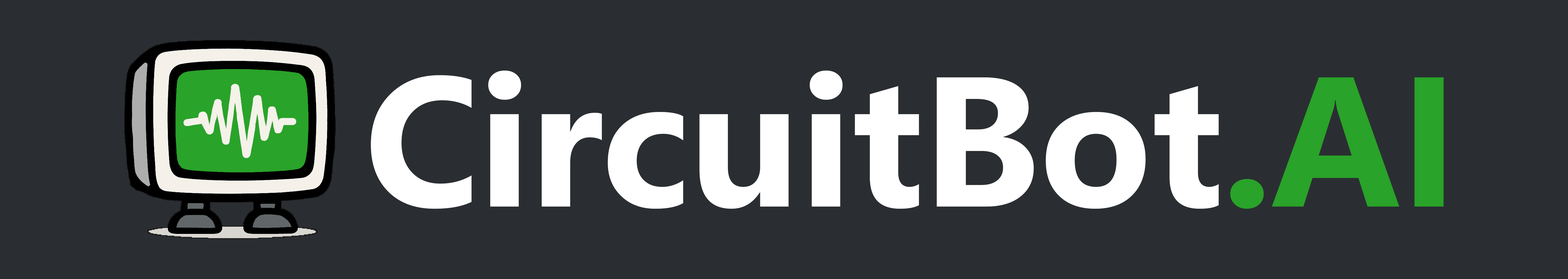
<style>
.page{position:relative;width:1568px;height:279px;background:#2a2e32}
.page>*{position:absolute;margin:0}
.t1{font:184.4px "SegoeUI-Bold";letter-spacing:-0.005em;color:#ffffff}
.t2{font:184.4px "SegoeUI-Bold";letter-spacing:-0.005em;color:#29a329}
</style>
<div class="page">
<p class="t1" style="left:371px;top:71px;width:1073px;height:138px">CircuitBot<span class="t2">.AI</span></p>
</div>
